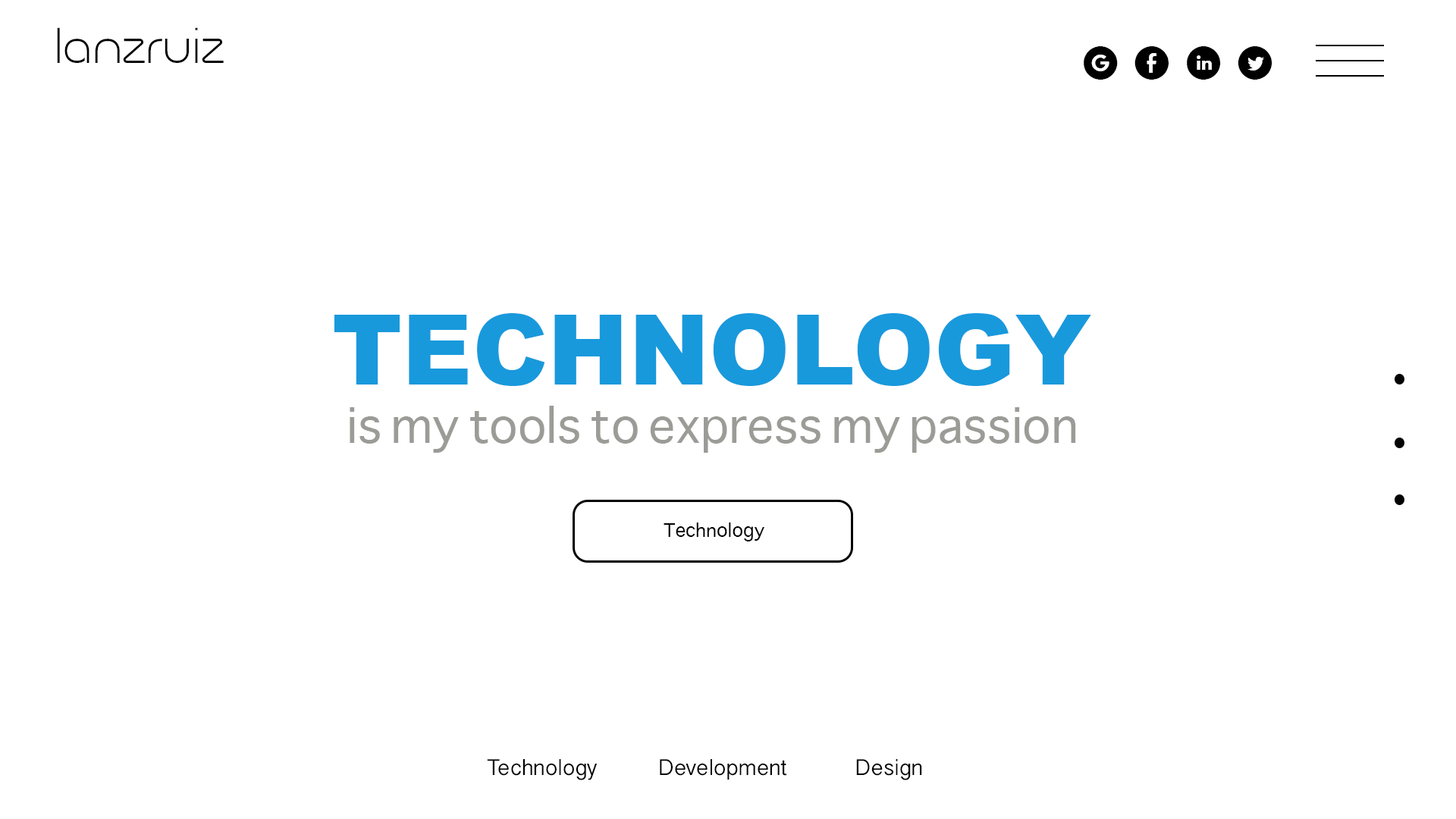
<style>
.page{position:relative;width:1456px;height:819px;background:#ffffff}
.page>*{position:absolute;margin:0}
.t1{font:49.3px "MagettasDEMOLight";color:#000000}
.t2{font:33.4px "SocialMediaCircled";color:#000000}
.t3{font:97.1px "Arial-Black";color:#1899dc}
.t4{font:47px "Sathu";color:#9b9b97}
.t5{font:18.2px "Sathu";color:#000000}
.t6{font:22.7px "KhmerSangamMN";color:#000000}
</style>
<div class="page">
<p class="t1" style="left:57px;top:27px;width:167px;height:36px">lanzruiz</p>
<p class="t2" style="left:1084px;top:46px;width:188px;height:34px">q  E  C  D</p>
<p class="t3" style="left:334px;top:313px;width:757px;height:73px">TECHNOLOGY</p>
<p class="t4" style="left:350px;top:406px;width:726px;height:47px">is my tools to express my passion</p>
<p class="t5" style="left:664px;top:522px;width:100px;height:19px">Technology</p>
<p class="t6" style="left:487px;top:759px;width:435px;height:21px">Technology         Development          Design</p>
</div>
